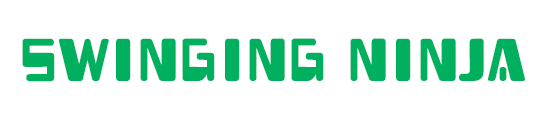
<style>
.page{position:relative;width:550px;height:120px;background:#ffffff}
.page>*{position:absolute;margin:0}
.t1{font:72px "HeavyData";color:#00b05e}
</style>
<div class="page">
<p class="t1" style="left:22px;top:38px;width:503px;height:44px">SWINGING NINJA</p>
</div>
